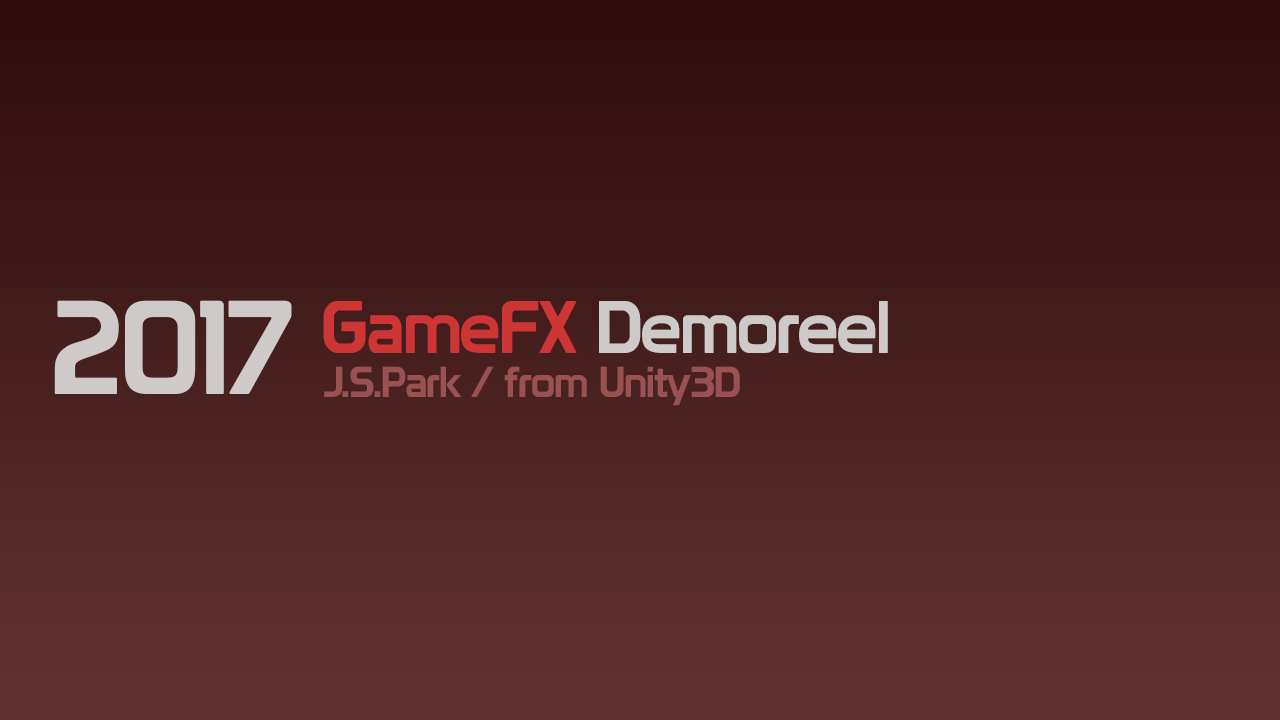
<style>
.page{position:relative;width:1280px;height:720px}
.page>*{position:absolute;margin:0}
.t1{font:130px "Prototype";letter-spacing:-0.025em;color:#d0caca}
.t2{font:72.6px "Prototype";letter-spacing:-0.025em}
.t3{font:42.4px "Prototype";letter-spacing:-0.025em;color:#995151}
</style>
<div class="page">
<p class="t1" style="left:54px;top:300px;width:238px;height:94px">2017</p>
<p class="t2" style="left:323px;top:301px;width:565px;height:52px">GameFX Demoreel</p>
<p class="t3" style="left:324px;top:366px;width:416px;height:40px">J.S.Park / from Unity3D</p>
</div>
